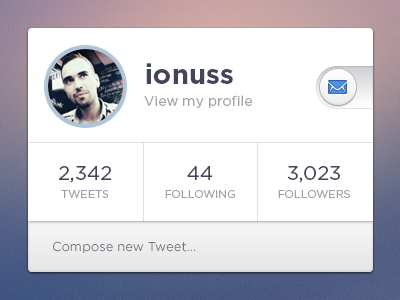
<style>
.page{position:relative;width:400px;height:300px;background:#ffffff}
.page>*{position:absolute;margin:0}
.t1{font:14px/22px "Gotham-Book";color:#a0a1a7}
.t2{font:28px/22px "Gotham-Bold";color:#434658}
.t3{font:11px/18px "Gotham-Book";color:#a0a1a7;text-transform:uppercase}
.t4{font:20px/18px "Gotham-Book";color:#434658}
.t5{font:13px "Gotham-Book";color:#70727d}
</style>
<div class="page">
<p class="t1" style="left:144px;top:63px;width:108px;height:45px"><span class="t2">ionuss<br></span>View my profile</p>
<p class="t3" style="left:59px;top:166px;width:53px;height:32px;text-align:center"><span class="t4">2,342<br></span>tweets</p>
<p class="t3" style="left:165px;top:166px;width:70px;height:32px;text-align:center"><span class="t4">44<br></span>following</p>
<p class="t3" style="left:278px;top:166px;width:72px;height:32px;text-align:center"><span class="t4">3,023<br></span>followers</p>
<p class="t5" style="left:53px;top:241px;width:142px;height:12px">Compose new Tweet...</p>
</div>
